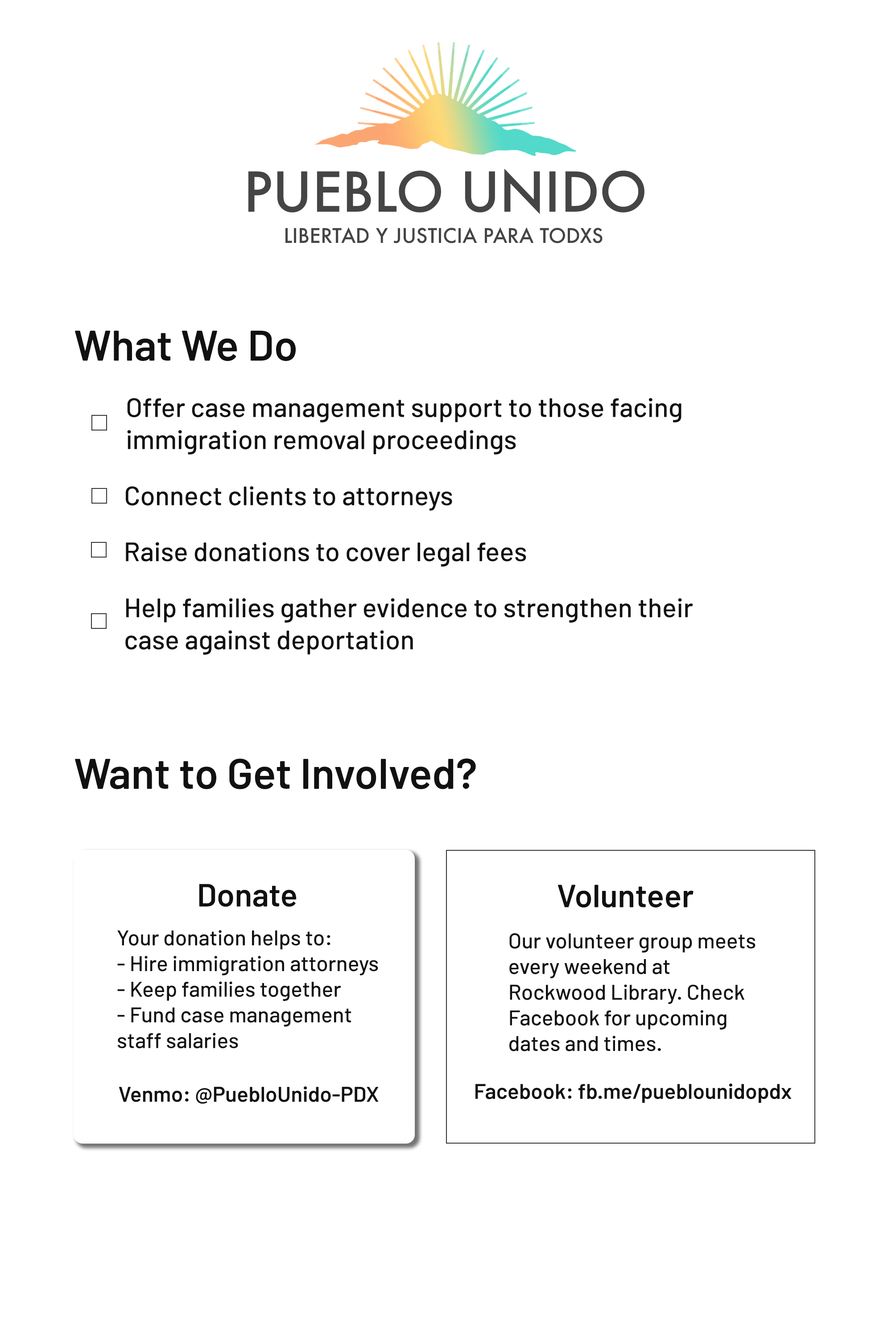
<style>
.page{position:relative;width:892px;height:1337px;background:#ffffff}
.page>*{position:absolute;margin:0}
.t1{font:42.8px "Barlow-SemiBold";color:#111111}
.t2{font:26.7px "Barlow-Medium";color:#111111}
.t3{font:32.1px "Barlow-SemiBold";color:#111111}
.t4{font:21.4px "Barlow-Medium";color:#111111}
.t5{font:21.4px "Barlow-SemiBold";color:#111111}
</style>
<div class="page">
<p class="t1" style="left:75px;top:331px;width:221px;height:30px">What We Do</p>
<p class="t2" style="left:127px;top:398px;width:554px;height:57px">Offer case management support to those facing <br>immigration removal proceedings</p>
<p class="t2" style="left:126px;top:486px;width:326px;height:25px">Connect clients to attorneys</p>
<p class="t2" style="left:126px;top:542px;width:400px;height:25px">Raise donations to cover legal fees</p>
<p class="t2" style="left:125px;top:598px;width:568px;height:57px">Help families gather evidence to strengthen their <br>case against deportation</p>
<p class="t1" style="left:75px;top:759px;width:401px;height:31px">Want to Get Involved?</p>
<p class="t3" style="left:199px;top:884px;width:97px;height:23px">Donate</p>
<p class="t3" style="left:557px;top:885px;width:136px;height:23px">Volunteer</p>
<p class="t4" style="left:117px;top:930px;width:261px;height:119px">Your donation helps to:<br>- Hire immigration attorneys<br>- Keep families together<br>- Fund case management<br>staff salaries</p>
<p class="t4" style="left:509px;top:934px;width:246px;height:118px">Our volunteer group meets<br>every weekend at <br>Rockwood Library. Check <br>Facebook for upcoming<br>dates and times.</p>
<p class="t5" style="left:475px;top:1084px;width:316px;height:19px">Facebook: fb.me/pueblounidopdx</p>
<p class="t5" style="left:119px;top:1086px;width:259px;height:18px">Venmo: @PuebloUnido-PDX</p>
</div>
